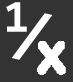
<style>
.page{position:relative;width:73px;height:82px;background:#333333}
.page>*{position:absolute;margin:0}
.t1{font:45.5px "Consolas-Bold";color:#ffffff}
.t2{font:64px "Consolas-Bold";color:#ffffff}
</style>
<div class="page">
<p class="t1" style="left:6px;top:2px;width:21px;height:30px">1</p>
<p class="t2" style="left:11px;top:13px;width:42px;height:47px;rotate:13deg">/</p>
</div>
